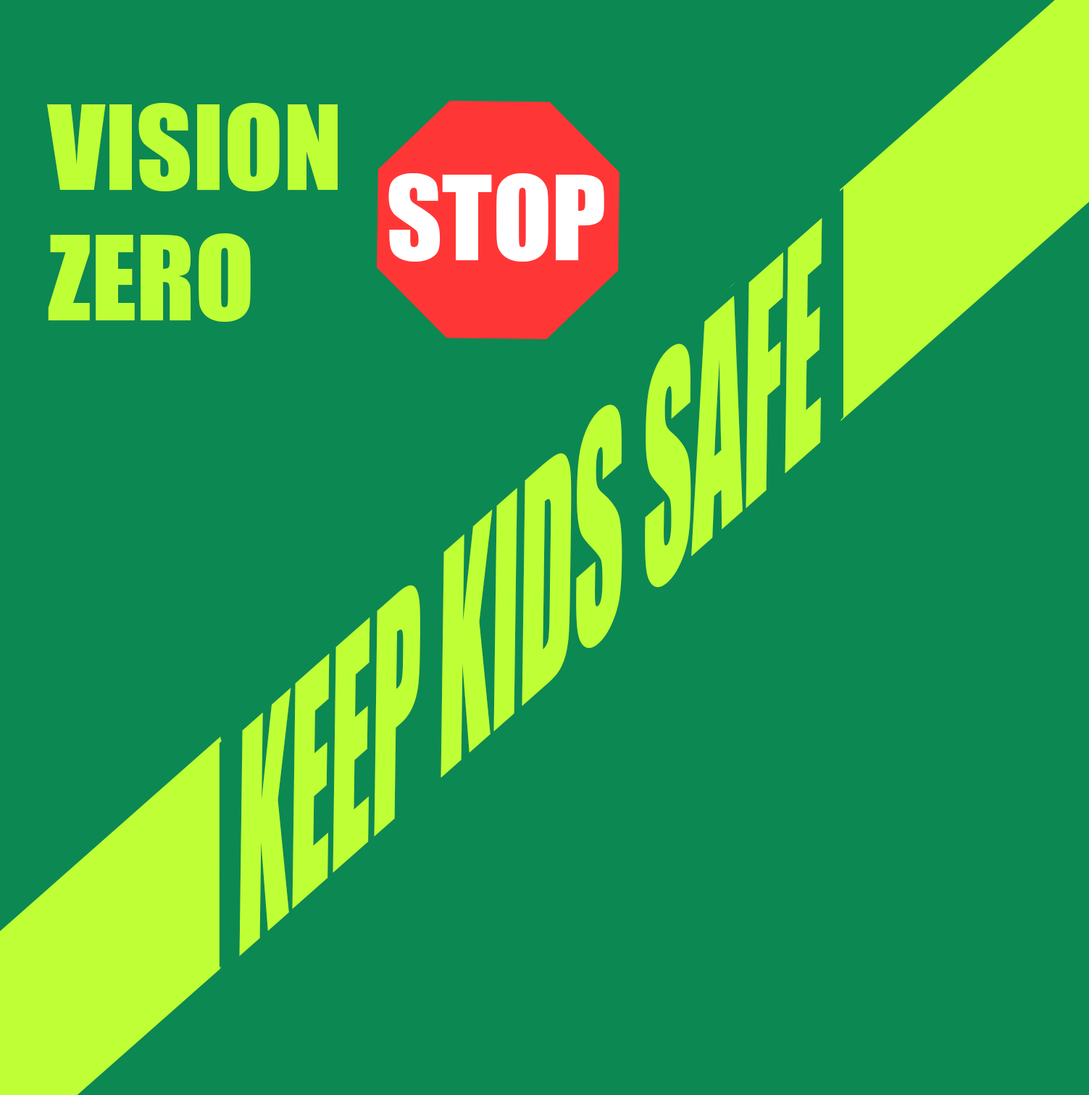
<style>
.page{position:relative;width:1089px;height:1095px;background:#0c8852}
.page>*{position:absolute;margin:0}
.t1{font:107.6px "Impact";color:#bfff36}
.t2{font:107.6px "Impact";color:#ffffff}
.t3{font:285.2px "Impact";color:#bfff36;scale:0.46 1}
</style>
<div class="page">
<p class="t1" style="left:47px;top:103px;width:291px;height:219px">VISION <br>ZERO</p>
<p class="t2" style="left:388px;top:173px;width:216px;height:89px">STOP</p>
<p class="t3" style="left:239px;top:217px;width:583px;height:739px;rotate:-41deg">KEEP KIDS SAFE</p>
</div>
